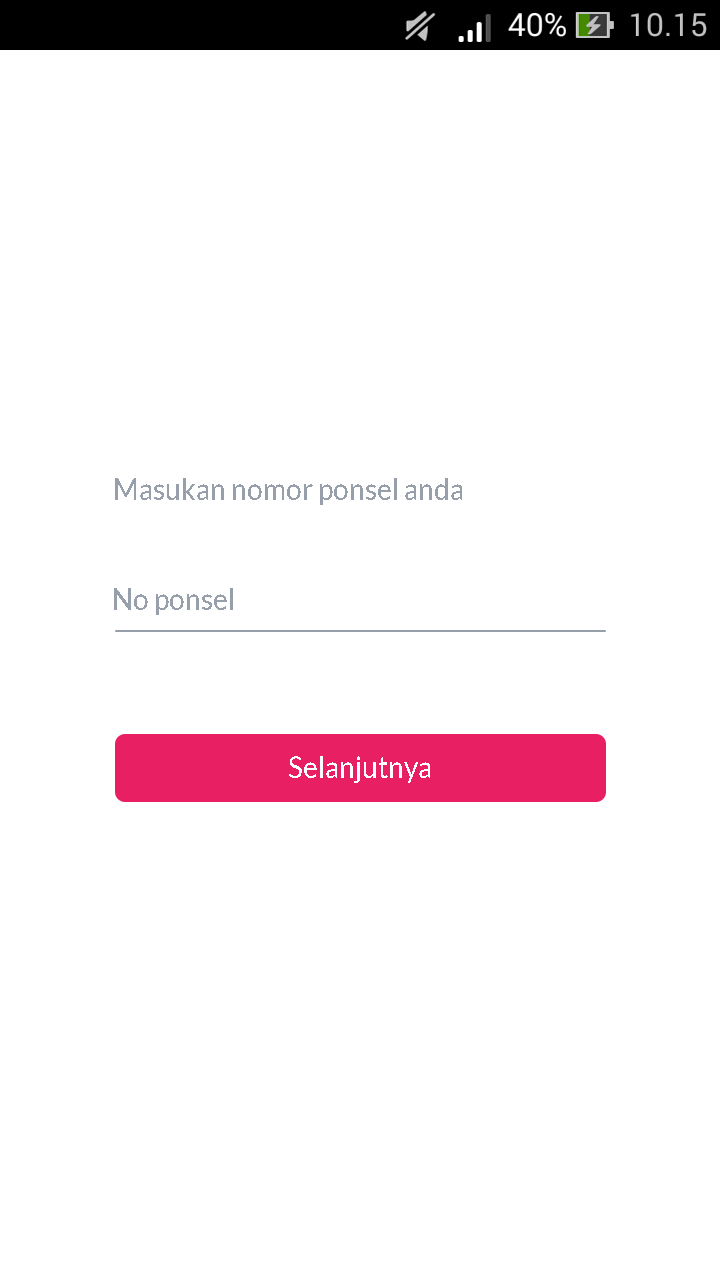
<style>
.page{position:relative;width:720px;height:1280px;background:#ffffff}
.page>*{position:absolute;margin:0}
.t1{font:29.1px "Lato-Regular";color:#969faa;scale:0.96 1}
.t2{font:29.2px "Lato-Regular";color:#969faa;scale:0.96 1}
.t3{font:29.2px "Lato-Regular";color:#ffffff;scale:0.96 1}
</style>
<div class="page">
<p class="t1" style="left:115px;top:478px;width:347px;height:27px">Masukan nomor ponsel anda</p>
<p class="t2" style="left:114px;top:588px;width:119px;height:27px">No ponsel</p>
<p class="t3" style="left:289px;top:756px;width:141px;height:27px">Selanjutnya</p>
</div>
